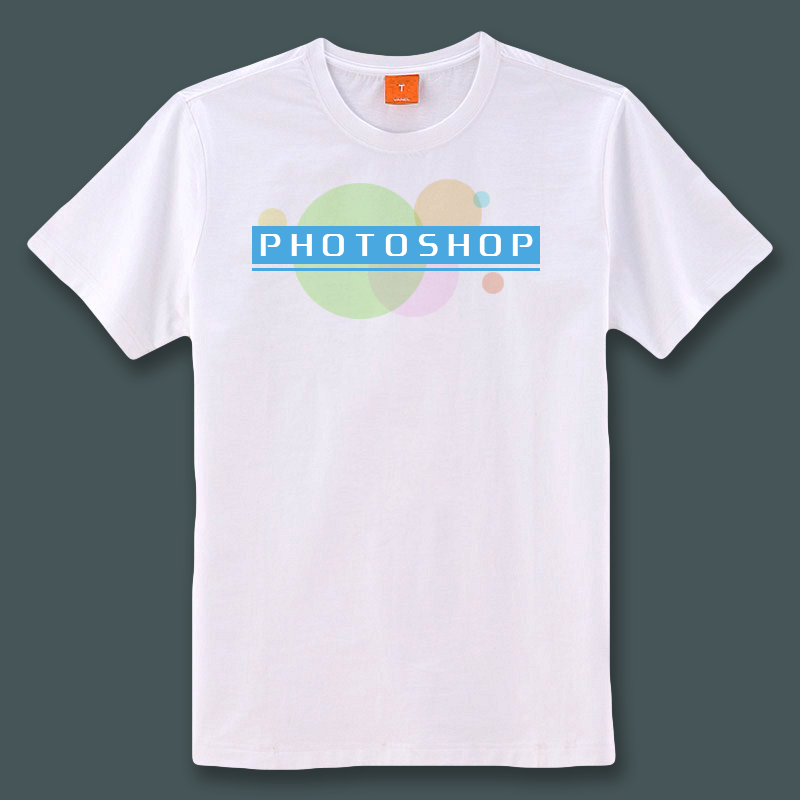
<style>
.page{position:relative;width:800px;height:800px;background:#465558}
.page>*{position:absolute;margin:0}
.t1{font:37.9px "ft39-Normal";letter-spacing:0.14em;color:#ffffff;scale:1.5 1}
</style>
<div class="page">
<p class="t1" style="left:260px;top:234px;width:273px;height:22px">PHOTOSHOP</p>
</div>
